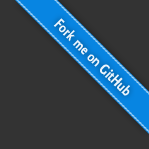
<style>
.page{position:relative;width:149px;height:149px;background:#333333}
.page>*{position:absolute;margin:0}
.t1{font:16px "Collegiate";color:#ffffff}
</style>
<div class="page">
<p class="t1" style="left:53px;top:18px;width:77px;height:78px;rotate:45deg">Fork me on GitHub</p>
</div>
